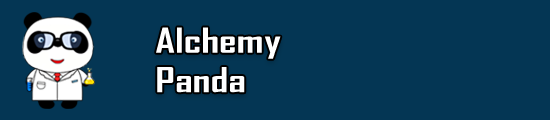
<style>
.page{position:relative;width:550px;height:120px;background:#043654}
.page>*{position:absolute;margin:0}
.t1{font:32.9px "AgencyFB-Bold";color:#ffffff;scale:1.33 1}
</style>
<div class="page">
<p class="t1" style="left:156px;top:27px;width:125px;height:66px">Alchemy <br>Panda</p>
</div>
